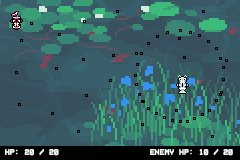
<style>
.page{position:relative;width:240px;height:160px;background:#385864}
.page>*{position:absolute;margin:0}
.t1{font:8px "VCROSDMono";color:#ffffff;font-weight:bold}
</style>
<div class="page">
<p class="t1" style="left:5px;top:149px;width:54px;height:7px">HP: 20 / 20</p>
<p class="t1" style="left:150px;top:149px;width:83px;height:7px">ENEMY HP: 10 / 20</p>
</div>
